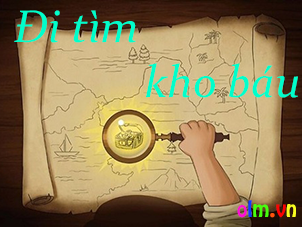
<style>
.page{position:relative;width:302px;height:227px}
.page>*{position:absolute;margin:0}
.t1{font:45.8px "Constantia-Italic";color:#00fecb}
.t2{font:19.6px "VNI-Hobo";color:#fe0ed4}
.t3{font:19.6px "VNI-Hobo";color:#0e3bfe}
.t4{font:19.6px "VNI-Hobo";color:#46fe0e}
.t5{font:19.6px "VNI-Hobo";color:#fe520e}
.t6{font:19.6px "VNI-Hobo";color:#fc0303}
.t7{font:19.6px "VNI-Hobo";color:#f8fb20}
</style>
<div class="page">
<p class="t1" style="left:14px;top:10px;width:284px;height:88px;text-align:center">Đi tìm  <br>                         kho báu</p>
<p class="t2" style="left:237px;top:200px;width:59px;height:18px">o<span class="t3">l</span><span class="t4">m</span><span class="t5">.</span><span class="t6">v</span><span class="t7">n</span></p>
</div>
